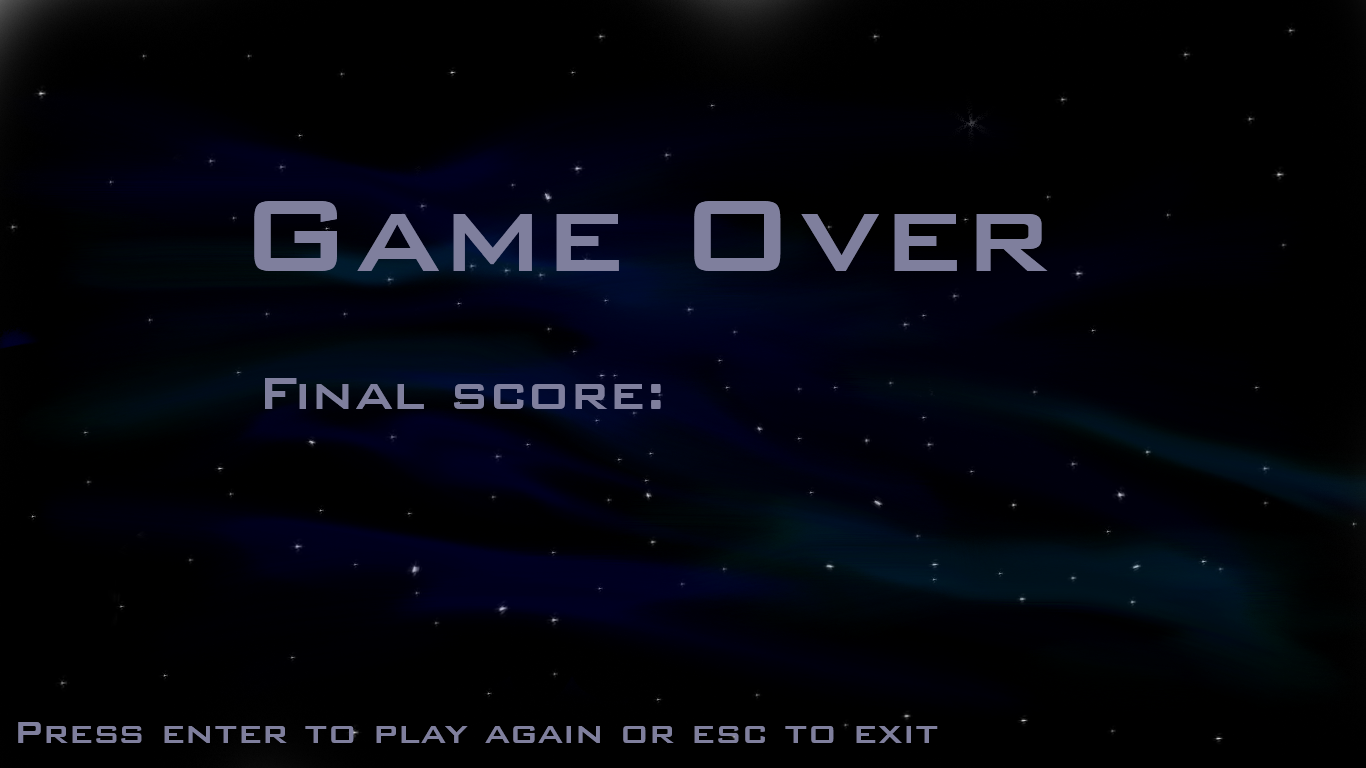
<style>
.page{position:relative;width:1366px;height:768px;background:#000000}
.page>*{position:absolute;margin:0}
.t1{font:135px "BankGothicBT-Medium";color:#7f7f9d}
.t2{font:60px "BankGothicBT-Medium";color:#7f7f9d}
.t3{font:40px "BankGothicBT-Medium";color:#7f7f9d}
</style>
<div class="page">
<p class="t1" style="left:254px;top:201px;width:794px;height:70px">Game Over</p>
<p class="t2" style="left:265px;top:378px;width:396px;height:31px">Final score:</p>
<p class="t3" style="left:18px;top:722px;width:920px;height:21px">Press enter to play again or esc to exit</p>
</div>
